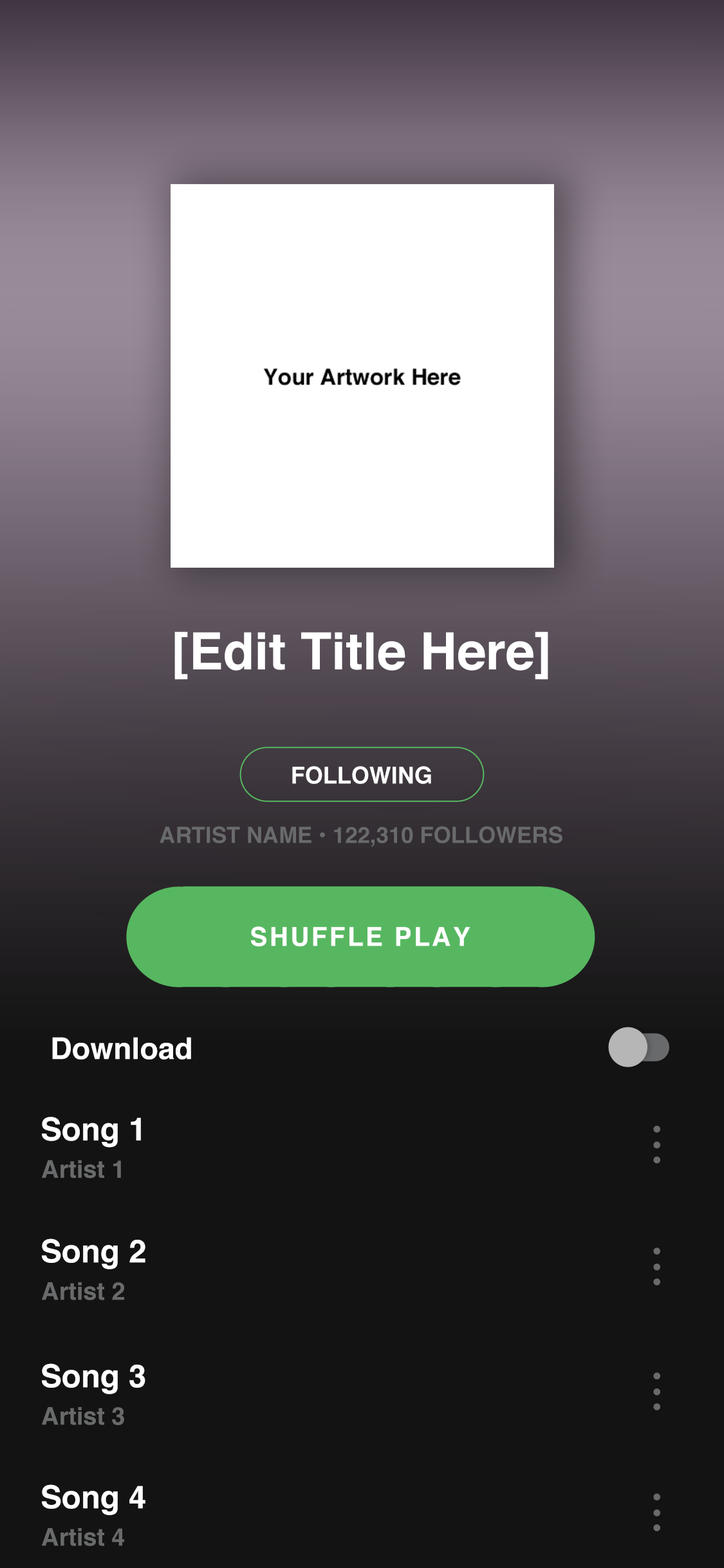
<style>
.page{position:relative;width:724px;height:1568px;background:#131313}
.page>*{position:absolute;margin:0}
.t1{font:51.3px "Helvetica-Bold";color:#ffffff}
.t2{font:23.2px "Helvetica-Bold";color:#ffffff}
.t3{font:22.4px "Helvetica-Bold";color:#696a6b;text-transform:uppercase}
.t4{font:26.1px "Helvetica-Bold";letter-spacing:0.08em;color:#ffffff;text-transform:uppercase}
.t5{font:29.9px "Helvetica-Bold";color:#ffffff}
.t6{font:31.7px "Helvetica-Bold";color:#ffffff}
.t7{font:24.3px "Helvetica-Bold";color:#696a6b}
</style>
<div class="page">
<p class="t1" style="left:174px;top:631px;width:374px;height:49px">[Edit Title Here]</p>
<p class="t2" style="left:292px;top:766px;width:139px;height:18px">FOLLOWING</p>
<p class="t3" style="left:160px;top:826px;width:403px;height:21px">Artist Name • 122,310 Followers</p>
<p class="t4" style="left:251px;top:926px;width:220px;height:21px">Shuffle Play</p>
<p class="t5" style="left:52px;top:1037px;width:139px;height:22px">Download</p>
<p class="t6" style="left:42px;top:1117px;width:99px;height:31px">Song 1</p>
<p class="t7" style="left:42px;top:1160px;width:79px;height:19px">Artist 1</p>
<p class="t6" style="left:42px;top:1238px;width:103px;height:31px">Song 2</p>
<p class="t7" style="left:42px;top:1282px;width:82px;height:18px">Artist 2</p>
<p class="t6" style="left:42px;top:1363px;width:103px;height:31px">Song 3</p>
<p class="t7" style="left:42px;top:1407px;width:82px;height:18px">Artist 3</p>
<p class="t6" style="left:42px;top:1484px;width:103px;height:31px">Song 4</p>
<p class="t7" style="left:42px;top:1528px;width:82px;height:18px">Artist 4</p>
</div>
